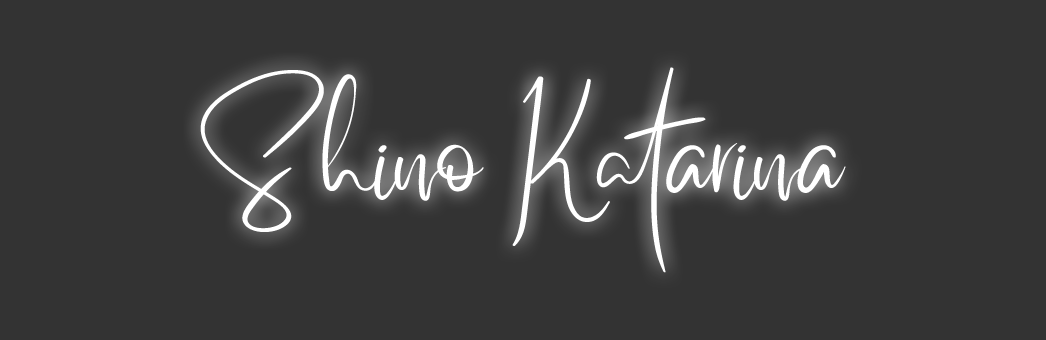
<style>
.page{position:relative;width:1046px;height:340px;background:#333333}
.page>*{position:absolute;margin:0}
.t1{font:100px "BetterSaturdayPersonalUse";color:#ffffff}
</style>
<div class="page">
<p class="t1" style="left:200px;top:67px;width:646px;height:206px">Shino Katarina</p>
</div>
